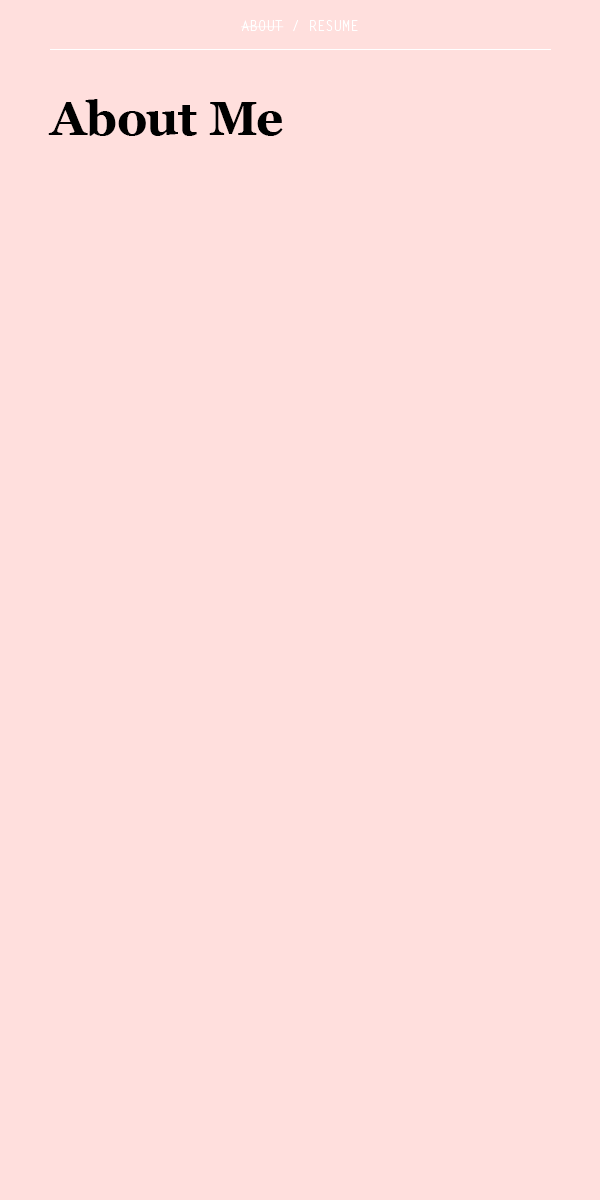
<style>
.page{position:relative;width:600px;height:1200px;background:#ffdfdd}
.page>*{position:absolute;margin:0}
.t1{font:14px "LetterGothicStd";color:#ffffff}
.t2{font:48px "Georgia-Bold";color:#000000}
</style>
<div class="page">
<p class="t1" style="left:241px;top:20px;width:117px;height:12px">ABOUT / RESUME</p>
<p class="t2" style="left:48px;top:99px;width:235px;height:37px">About Me</p>
</div>
